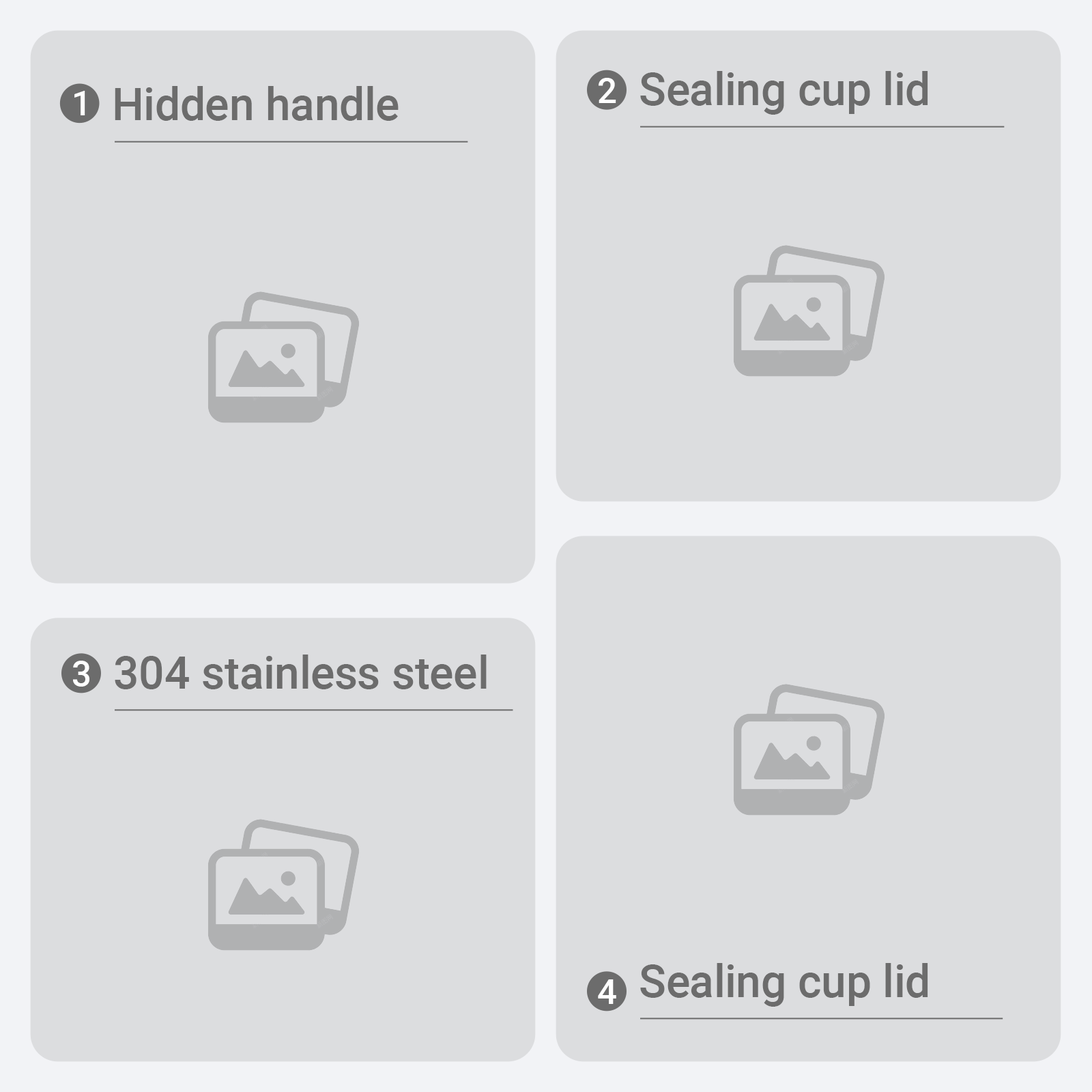
<style>
.page{position:relative;width:1092px;height:1092px;background:#dcdddf}
.page>*{position:absolute;margin:0}
.t1{font:34.9px "Roboto-Medium";color:#ffffff}
.t2{font:45.1px "Roboto-Medium";color:#6c6c6c}
</style>
<div class="page">
<p class="t1" style="left:599px;top:78px;width:17px;height:25px">2</p>
<p class="t2" style="left:640px;top:71px;width:288px;height:44px">Sealing cup lid</p>
<p class="t2" style="left:115px;top:86px;width:284px;height:35px">Hidden handle</p>
<p class="t1" style="left:74px;top:91px;width:11px;height:24px">1</p>
<p class="t1" style="left:73px;top:661px;width:16px;height:26px">3</p>
<p class="t2" style="left:115px;top:655px;width:372px;height:34px">304 stainless steel</p>
<p class="t2" style="left:640px;top:963px;width:288px;height:44px">Sealing cup lid</p>
<p class="t1" style="left:598px;top:979px;width:18px;height:25px">4</p>
</div>
